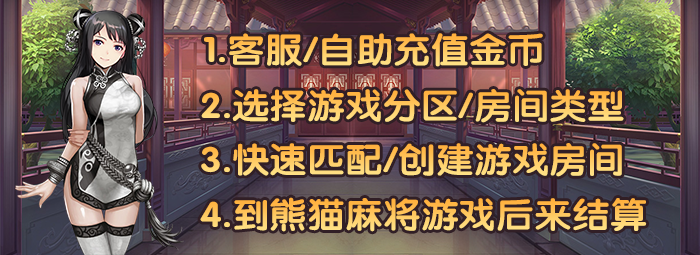
<style>
.page{position:relative;width:700px;height:255px}
.page>*{position:absolute;margin:0}
.t1{font:35px "FZY4JW--GB1-0";scale:1.08 1}
</style>
<div class="page">
<p class="t1" style="left:204px;top:33px;width:339px;height:34px">1.客服/自助充值金币</p>
<p class="t1" style="left:201px;top:89px;width:423px;height:34px">2.选择游戏分区/房间类型</p>
<p class="t1" style="left:201px;top:143px;width:421px;height:34px">3.快速匹配/创建游戏房间</p>
<p class="t1" style="left:200px;top:197px;width:447px;height:35px">4.到熊猫麻将游戏后来结算</p>
</div>
